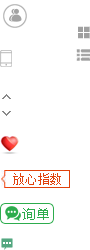
<style>
.page{position:relative;width:90px;height:250px;background:#ffffff}
.page>*{position:absolute;margin:0}
.t1{font:12px "SimSun";letter-spacing:0.025em;color:#e0410c}
.t2{font:14px "MicrosoftYaHei";color:#2dac4d}
</style>
<div class="page">
<p class="t1" style="left:13px;top:173px;width:48px;height:12px">放心指数</p>
<p class="t2" style="left:22px;top:208px;width:27px;height:12px">询单</p>
</div>
